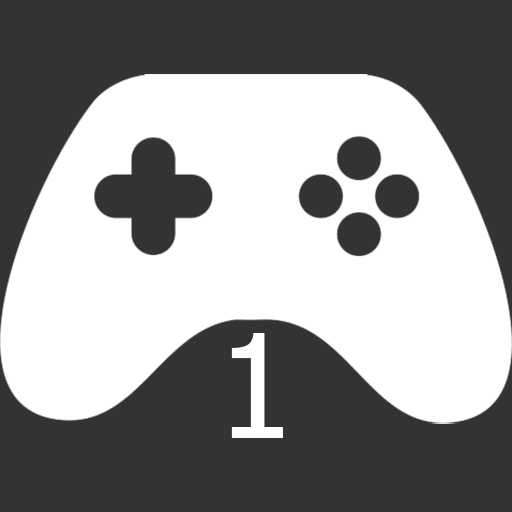
<style>
.page{position:relative;width:512px;height:512px;background:#333333}
.page>*{position:absolute;margin:0}
.t1{font:144px "Tahoma";color:#ffffff}
</style>
<div class="page">
<p class="t1" style="left:231px;top:333px;width:52px;height:105px">1</p>
</div>
